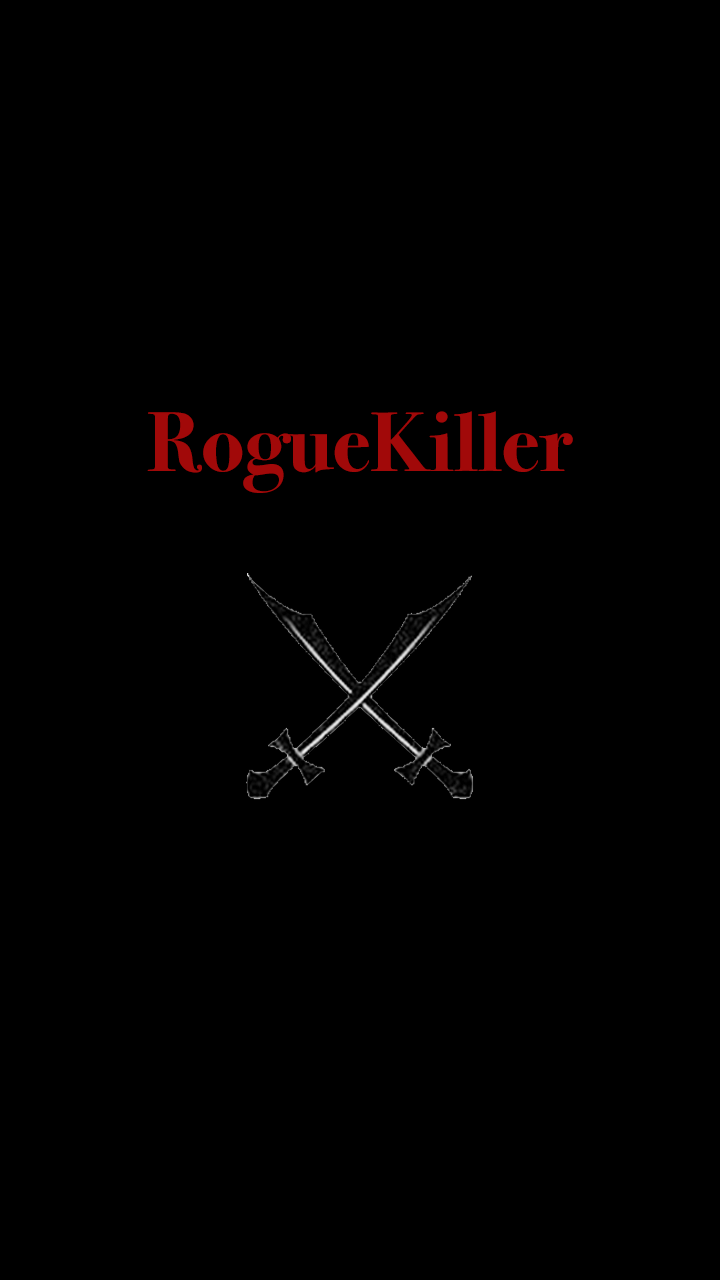
<style>
.page{position:relative;width:720px;height:1280px;background:#000000}
.page>*{position:absolute;margin:0}
.t1{font:84.7px "BodoniSvtyTwoOSITCTT-Bold";color:#a10909}
</style>
<div class="page">
<p class="t1" style="left:147px;top:411px;width:426px;height:82px">RogueKiller</p>
</div>
